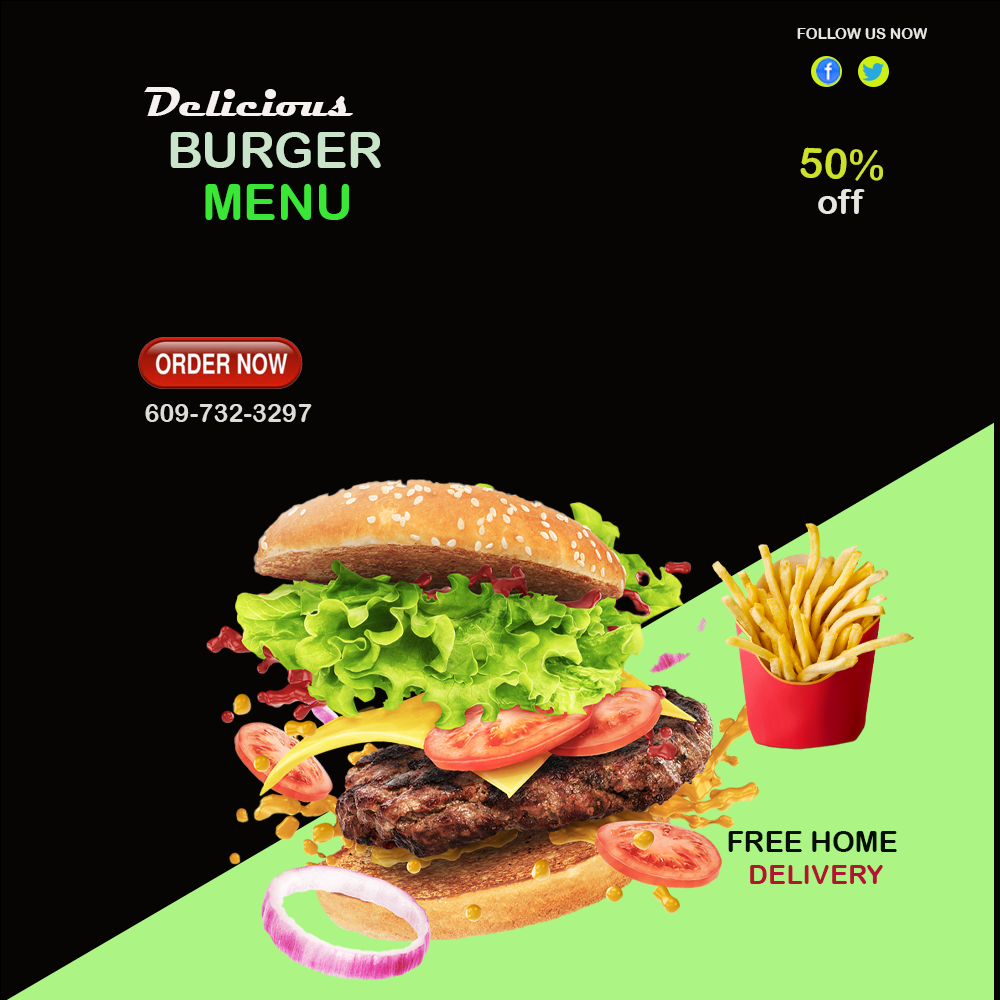
<style>
.page{position:relative;width:1000px;height:1000px;background:#060504}
.page>*{position:absolute;margin:0}
.t1{font:14.9px "ArialRoundedMTBold";color:#e5e6de}
.t2{font:41.6px "Magneto-Bold";color:#f6f1ef}
.t3{font:50px "ArialRoundedMTBold";color:#cae4c9}
.t4{font:41.9px "ArialRoundedMTBold";color:#cde02a}
.t5{font:50px "ArialRoundedMTBold";color:#3ae736}
.t6{font:34.9px "ArialRoundedMTBold";color:#e5e6de}
.t7{font:25.4px "ArialRoundedMTBold";color:#dcddd4}
.t8{font:28.8px "ArialRoundedMTBold";color:#060f06}
.t9{font:27.1px "ArialRoundedMTBold";color:#b01532}
</style>
<div class="page">
<p class="t1" style="left:797px;top:28px;width:130px;height:11px">FOLLOW US NOW</p>
<p class="t2" style="left:144px;top:87px;width:209px;height:29px">Delicious</p>
<p class="t3" style="left:170px;top:132px;width:211px;height:36px">BURGER</p>
<p class="t4" style="left:800px;top:147px;width:83px;height:34px;rotate:2deg">50%</p>
<p class="t5" style="left:205px;top:184px;width:144px;height:36px">MENU</p>
<p class="t6" style="left:818px;top:189px;width:47px;height:25px">off</p>
<p class="t7" style="left:145px;top:404px;width:167px;height:18px">609-732-3297</p>
<p class="t8" style="left:728px;top:831px;width:169px;height:21px">FREE HOME</p>
<p class="t9" style="left:750px;top:865px;width:133px;height:19px">DELIVERY</p>
</div>
